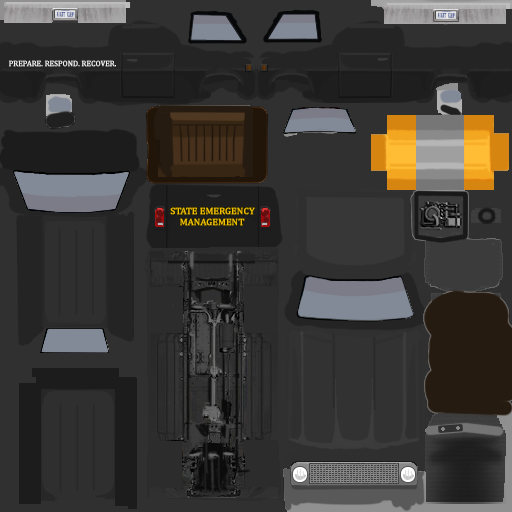
<style>
.page{position:relative;width:512px;height:512px}
.page>*{position:absolute;margin:0}
.t1{font:7.9px "CambriaMath";color:#f2f2f2;font-weight:bold;scale:0.95 1}
.t2{font:9.1px "CambriaMath";color:#f2c200;font-weight:bold;scale:1.03 1}
</style>
<div class="page">
<p class="t1" style="left:9px;top:60px;width:107px;height:7px">PREPARE. RESPOND. RECOVER.</p>
<p class="t2" style="left:170px;top:207px;width:85px;height:19px">STATE EMERGENCY<br>    MANAGEMENT</p>
</div>
